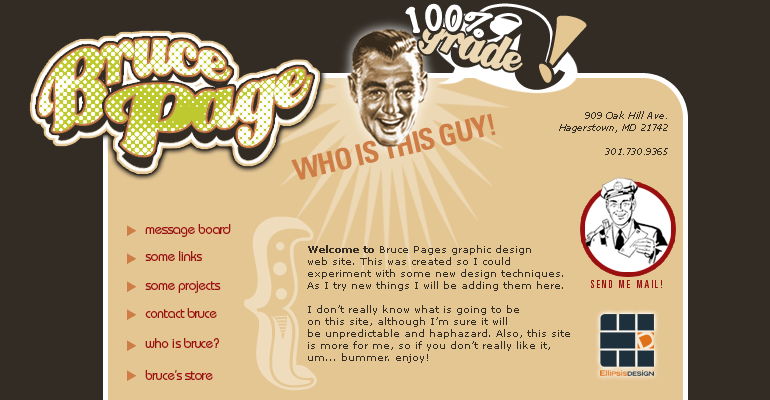
<style>
.page{position:relative;width:770px;height:400px;background:#e4c693}
.page>*{position:absolute;margin:0}
.t1{font:31.5px "MarkerFelt-Thin";letter-spacing:-0.04em;color:#ffffff}
.t2{font:31.5px "MarkerFelt-Thin";letter-spacing:-0.04em}
.t3{font:125.2px "Creampuff";letter-spacing:-0.04em;color:#322c25}
.t4{font:93.5px "Optima-Regular";letter-spacing:-0.04em;color:#e4c693}
.t5{font:38.3px "Creampuff";color:#ecd8b4}
.t6{font:38.3px "Creampuff";letter-spacing:-0.04em;color:#ecd8b4}
.t7{font:29.4px "Univers-CondensedBold";letter-spacing:-0.04em;color:#cf7d46}
.t8{font:10px "Verdana-Italic";letter-spacing:-0.04em;color:#322c25}
.t9{font:194.9px "Zebrawood-Regular";letter-spacing:-0.04em;color:#eedcbd}
.t10{font:14px "Bauhaus-Medium";letter-spacing:-0.04em;color:#9a1010}
.t11{font:10px "Verdana";color:#322c25}
.t12{font:10px "Verdana-Bold";color:#322c25}
.t13{font:10.5px "Univers-UltraCondensed";letter-spacing:0.2em;color:#9a1010}
</style>
<div class="page">
<p class="t1" style="left:405px;top:3px;width:88px;height:35px;rotate:3deg">100%</p>
<p class="t2" style="left:406px;top:6px;width:88px;height:35px;rotate:3deg">100%</p>
<p class="t3" style="left:450px;top:6px;width:115px;height:84px;rotate:18deg">A</p>
<p class="t4" style="left:539px;top:15px;width:48px;height:68px;rotate:24deg">!</p>
<p class="t5" style="left:418px;top:26px;width:105px;height:45px;rotate:18deg">g<span class="t6">r</span>ade</p>
<p class="t7" style="left:291px;top:113px;width:205px;height:67px;rotate:-13deg">WHO IS THIS GUY!</p>
<p class="t8" style="left:559px;top:111px;width:109px;height:44px;text-align:right">909 Oak Hill Ave.<br>Hagerstown, MD 21742<br><br>301.730.9365</p>
<p class="t9" style="left:244px;top:216px;width:73px;height:175px;rotate:178deg">}</p>
<p class="t10" style="left:145px;top:224px;width:86px;height:13px">message board</p>
<p class="t11" style="left:307px;top:245px;width:263px;height:118px"><span class="t12">Welcome to</span> Bruce Pages graphic design<br>web site. This was created so I could<br>experiment with some new design techniques.<br>As I try new things I will be adding them here.<br><br>I don’t really know what is going to be<br>on this site, although I’m sure it will<br>be unpredictable and haphazard. Also, this site<br>is more for me, so if you don’t really like it,<br>um... bummer. enjoy!</p>
<p class="t10" style="left:145px;top:251px;width:57px;height:10px">some links</p>
<p class="t10" style="left:145px;top:281px;width:76px;height:12px">some projects</p>
<p class="t13" style="left:591px;top:280px;width:71px;height:8px">SEND ME MAIL!</p>
<p class="t10" style="left:145px;top:308px;width:72px;height:10px">contact bruce</p>
<p class="t10" style="left:145px;top:338px;width:74px;height:10px">who is bruce?</p>
<p class="t10" style="left:145px;top:370px;width:68px;height:10px">bruce’s store</p>
</div>
